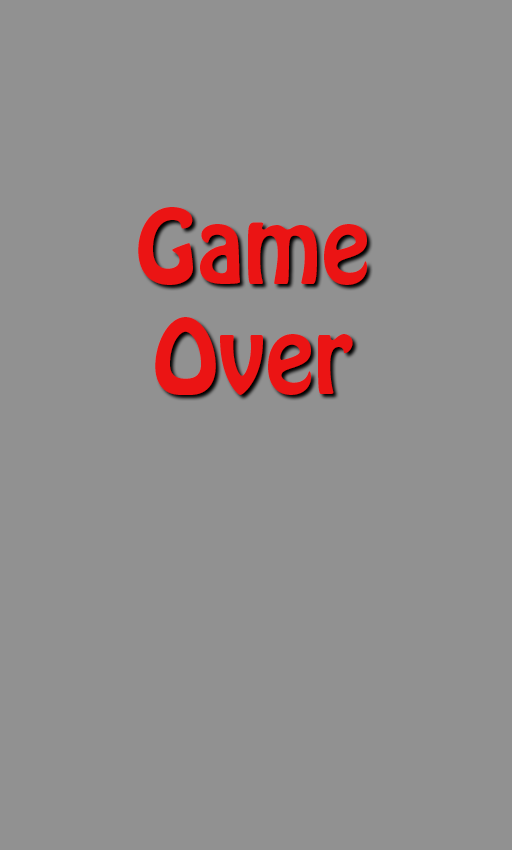
<style>
.page{position:relative;width:512px;height:850px;background:#919191}
.page>*{position:absolute;margin:0}
.t1{font:91.4px "HoboStd";color:#eb1414}
</style>
<div class="page">
<p class="t1" style="left:138px;top:207px;width:229px;height:188px;text-align:center">Game<br>Over</p>
</div>
